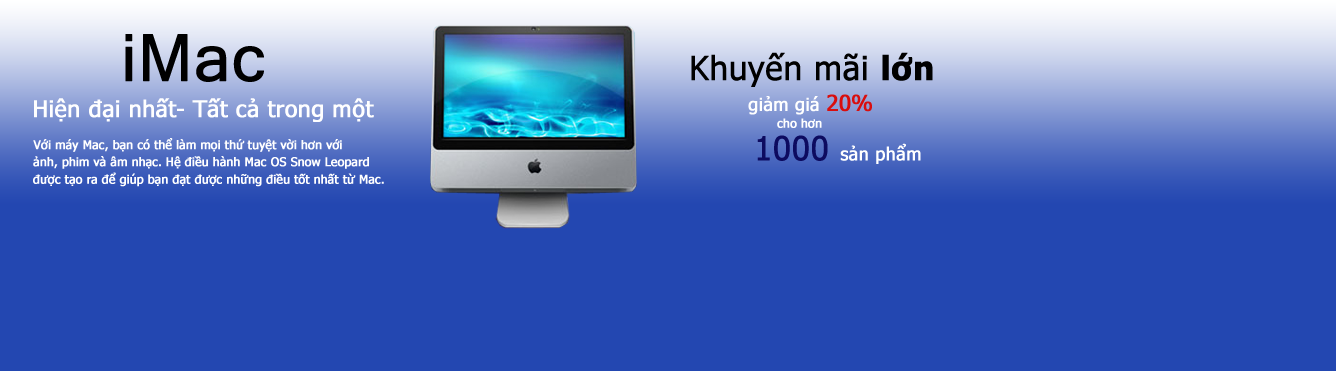
<style>
.page{position:relative;width:1336px;height:371px;background:#2347b1}
.page>*{position:absolute;margin:0}
.t1{font:65px "MicrosoftSansSerif";color:#000000;font-weight:bold}
.t2{font:33px "Tahoma";color:#000000;font-weight:bold}
.t3{font:33px "Tahoma-Bold";color:#000000;font-weight:bold}
.t4{font:23px "Tahoma";color:#ffffff;font-weight:bold}
.t5{font:18px "Tahoma";color:#ffffff;font-weight:bold}
.t6{font:22px "Tahoma";color:#d90e0e;font-weight:bold}
.t7{font:12px "Tahoma";color:#ffffff;font-weight:bold}
.t8{font:18px "Tahoma";color:#ffffff;font-weight:bold;font-style:italic}
.t9{font:33px "Tahoma";color:#0d0b60;font-weight:bold}
</style>
<div class="page">
<p class="t1" style="left:125px;top:34px;width:139px;height:48px">iMac</p>
<p class="t2" style="left:691px;top:52px;width:242px;height:35px">Khuyến mãi <span class="t3">lớn</span></p>
<p class="t4" style="left:34px;top:98px;width:340px;height:24px">Hiện đại nhất- Tất cả trong một</p>
<p class="t5" style="left:748px;top:94px;width:124px;height:21px">giảm giá <span class="t6">20%</span></p>
<p class="t7" style="left:777px;top:118px;width:45px;height:10px">cho hơn</p>
<p class="t5" style="left:757px;top:135px;width:164px;height:29px"><span class="t8"> </span><span class="t9">1000 </span>sản phẩm</p>
<p class="t7" style="left:33px;top:138px;width:309px;height:14px">Với máy Mac, bạn có thể làm mọi thứ tuyệt vời hơn với</p>
<p class="t7" style="left:33px;top:156px;width:128px;height:13px">ảnh, phim và âm nhạc.</p>
<p class="t7" style="left:166px;top:156px;width:203px;height:13px">Hệ điều hành Mac OS Snow Leopard</p>
<p class="t7" style="left:33px;top:172px;width:189px;height:15px">được tạo ra để giúp bạn đạt được</p>
<p class="t7" style="left:227px;top:173px;width:157px;height:14px">những điều tốt nhất từ Mac.</p>
</div>
